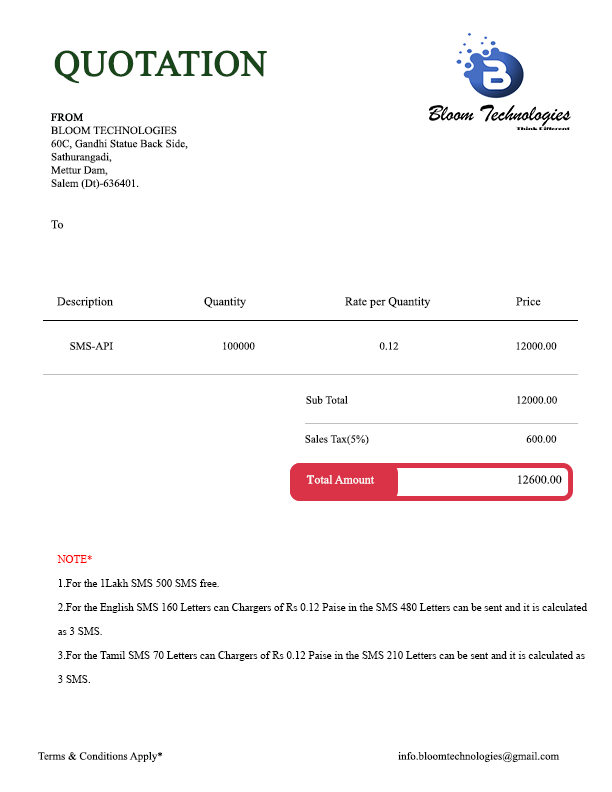
<style>
.page{position:relative;width:612px;height:792px;background:#ffffff}
.page>*{position:absolute;margin:0}
.t1{font:36px "TimesNewRomanPSMT";color:#19451b;font-weight:bold}
.t2{font:11px "TimesNewRomanPSMT";color:#010202}
.t3{font:11px "TimesNewRomanPSMT";color:#010202;font-weight:bold}
.t4{font:12px "TimesNewRomanPSMT";color:#000000}
.t5{font:12px "TimesNewRomanPSMT";color:#010202}
.t6{font:12px "TimesNewRomanPSMT";color:#fbfbfb}
.t7{font:12px "TimesNewRomanPSMT";color:#fbfbfb;font-variant:small-caps;font-weight:bold}
.t8{font:12px "TimesNewRomanPSMT";color:#010101}
.t9{font:11px/24px "TimesNewRomanPSMT";color:#010101}
.t10{font:11px/24px "TimesNewRomanPSMT";color:#ff0000}
.t11{font:11px "TimesNewRomanPSMT";color:#000000}
</style>
<div class="page">
<p class="t1" style="left:54px;top:50px;width:213px;height:34px">QUOTATION</p>
<p class="t2" style="left:51px;top:113px;width:137px;height:77px"><span class="t3">FROM<br></span>BLOOM TECHNOLOGIES<br>60C, Gandhi Statue Back Side,<br>Sathurangadi,<br>Mettur Dam,<br>Salem (Dt)-636401.</p>
<p class="t4" style="left:51px;top:220px;width:13px;height:9px">To</p>
<p class="t5" style="left:57px;top:297px;width:484px;height:11px">Description    Quantity   Rate per Quantity                  Price</p>
<p class="t2" style="left:70px;top:342px;width:487px;height:8px">SMS-API      100000                       0.12        12000.00</p>
<p class="t2" style="left:306px;top:396px;width:251px;height:8px">Sub Total                  12000.00</p>
<p class="t2" style="left:305px;top:435px;width:252px;height:10px">Sales Tax(5%)       600.00</p>
<p class="t6" style="left:306px;top:475px;width:256px;height:9px"><span class="t7">T</span>otal Amount           <span class="t8">   12600.00</span></p>
<p class="t9" style="left:57px;top:555px;width:531px;height:128px"><span class="t10">NOTE*<br></span>1.For the 1Lakh SMS 500 SMS free.<br>2.For the English SMS 160 Letters can Chargers of Rs 0.12 Paise in the SMS 480 Letters can be sent and it is calculated as 3 SMS.<br>3.For the Tamil SMS 70 Letters can Chargers of Rs 0.12 Paise in the SMS 210 Letters can be sent and it is calculated as 3 SMS.</p>
<p class="t2" style="left:38px;top:752px;width:125px;height:11px">Terms &amp; Conditions Apply*</p>
<p class="t11" style="left:398px;top:752px;width:162px;height:11px">info.bloomtechnologies@gmail.com</p>
</div>
